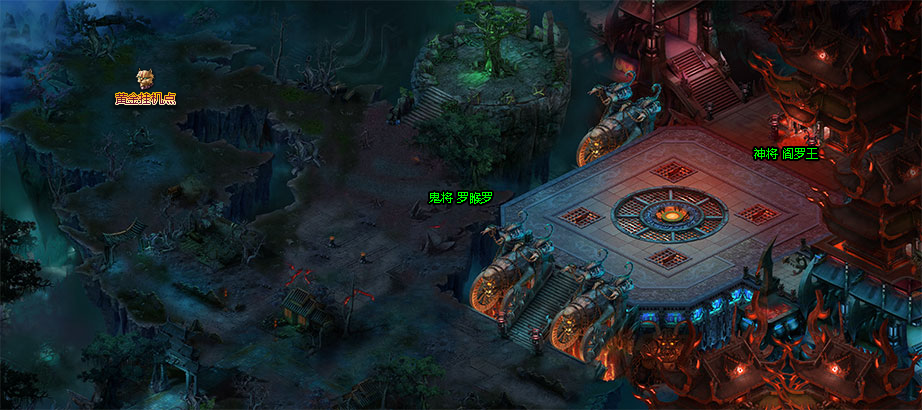
<style>
.page{position:relative;width:922px;height:410px}
.page>*{position:absolute;margin:0}
.t1{font:12px "MicrosoftYaHei";color:#701633}
.t2{font:12px "MicrosoftYaHei";color:#00ff00}
</style>
<div class="page">
<p class="t1" style="left:116px;top:93px;width:59px;height:11px">黄金挂机点</p>
<p class="t2" style="left:754px;top:148px;width:64px;height:11px">神将 阎罗王</p>
<p class="t2" style="left:429px;top:192px;width:63px;height:12px">鬼将 罗睺罗</p>
</div>
